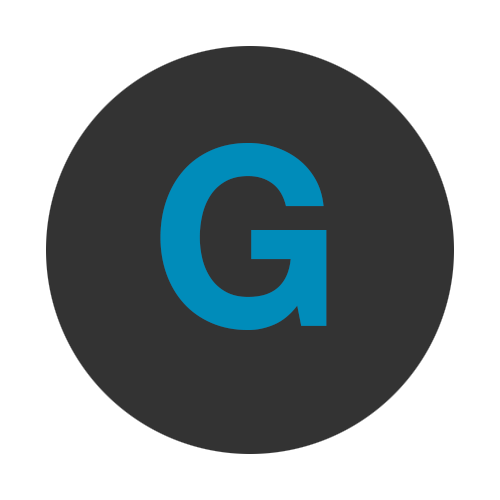
<style>
.page{position:relative;width:500px;height:500px;background:#ffffff}
.page>*{position:absolute;margin:0}
.t1{font:250px "HelveticaNeue-Bold";color:#008cba}
</style>
<div class="page">
<p class="t1" style="left:160px;top:143px;width:167px;height:187px">G</p>
</div>
